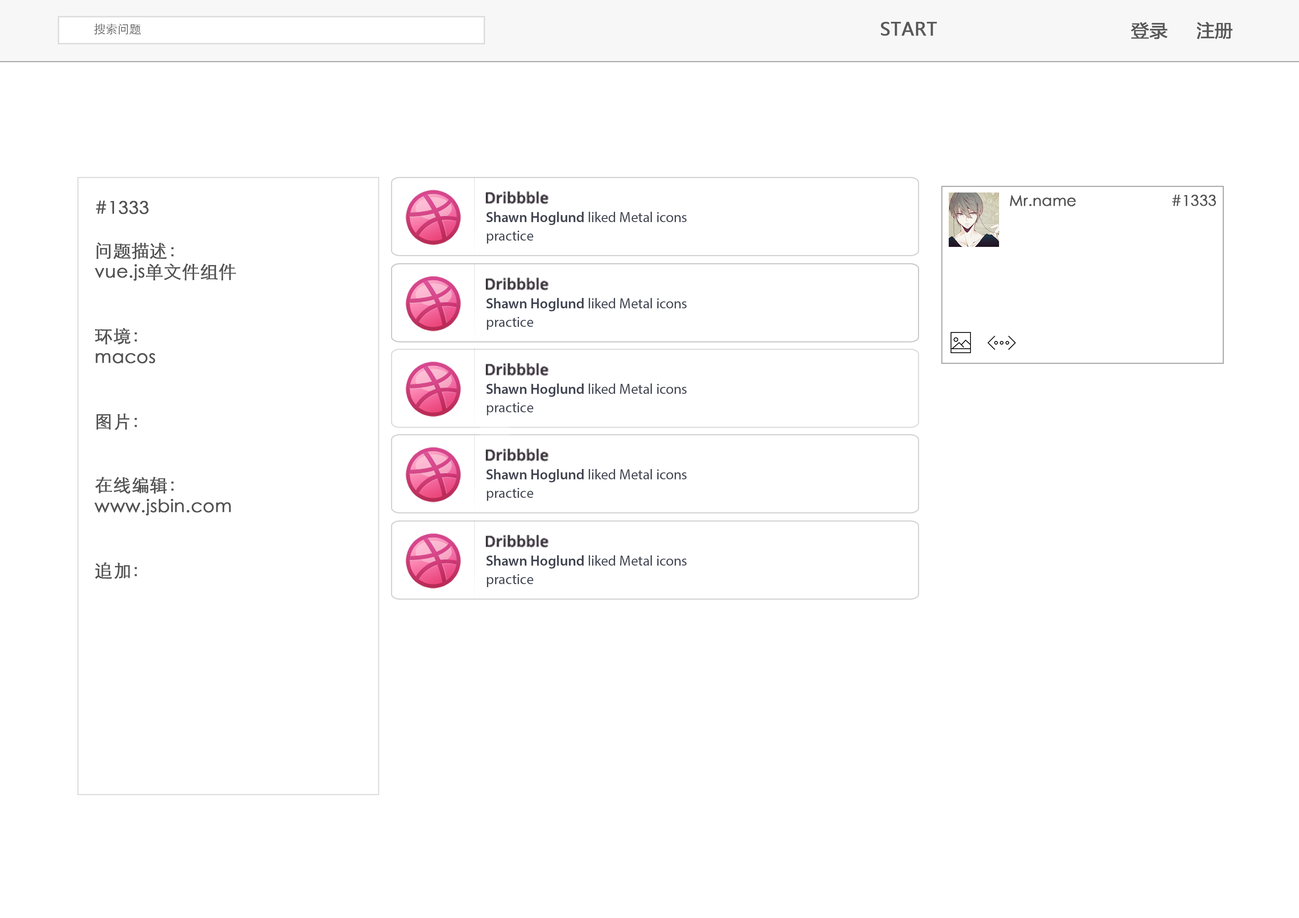
<style>
.page{position:relative;width:1299px;height:918px;background:#ffffff}
.page>*{position:absolute;margin:0}
.t1{font:11.8px "STHeitiSC-Light";color:#616161}
.t2{font:17.8px "MicrosoftYaHei";color:#595959;font-weight:bold}
.t3{font:15.4px "OpenSans-Semibold";color:#39313a}
.t4{font:14.8px "STHeitiSC-Light";color:#545454;font-weight:bold}
.t5{font:17.8px "STHeitiSC-Light";color:#545454;font-weight:bold}
.t6{font:14.3px/18.7px "MyriadPro-Regular";color:#414551}
.t7{font:14.3px/18.7px "MyriadPro-Semibold";color:#414551}
</style>
<div class="page">
<p class="t1" style="left:94px;top:24px;width:47px;height:10px">搜索问题</p>
<p class="t2" style="left:881px;top:22px;width:56px;height:14px">START</p>
<p class="t2" style="left:1131px;top:22px;width:101px;height:17px">登录     注册</p>
<p class="t3" style="left:486px;top:191px;width:62px;height:13px">Dribbble</p>
<p class="t4" style="left:1010px;top:195px;width:206px;height:12px">Mr.name                       #1333</p>
<p class="t5" style="left:94px;top:201px;width:142px;height:378px">#1333<br><br>问题描述：<br>vue.js单文件组件<br><br><br>环境：<br>macos<br><br><br>图片：<br><br><br>在线编辑：<br>www.jsbin.com<br><br><br>追加：</p>
<p class="t6" style="left:486px;top:212px;width:200px;height:32px"><span class="t7">Shawn Hoglund </span>liked Metal icons <br>practice</p>
<p class="t3" style="left:486px;top:278px;width:62px;height:13px">Dribbble</p>
<p class="t6" style="left:486px;top:298px;width:200px;height:32px"><span class="t7">Shawn Hoglund </span>liked Metal icons <br>practice</p>
<p class="t3" style="left:486px;top:363px;width:62px;height:13px">Dribbble</p>
<p class="t6" style="left:486px;top:384px;width:200px;height:31px"><span class="t7">Shawn Hoglund </span>liked Metal icons <br>practice</p>
<p class="t3" style="left:486px;top:449px;width:62px;height:13px">Dribbble</p>
<p class="t6" style="left:486px;top:469px;width:200px;height:32px"><span class="t7">Shawn Hoglund </span>liked Metal icons <br>practice</p>
<p class="t3" style="left:486px;top:535px;width:62px;height:13px">Dribbble</p>
<p class="t6" style="left:486px;top:555px;width:200px;height:32px"><span class="t7">Shawn Hoglund </span>liked Metal icons <br>practice</p>
</div>
